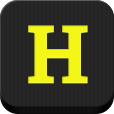
<style>
.page{position:relative;width:114px;height:114px;background:#242424}
.page>*{position:absolute;margin:0}
.t1{font:79.3px "AdelleBasic-Bold";letter-spacing:0.02em;color:#f3f617}
</style>
<div class="page">
<p class="t1" style="left:28px;top:25px;width:60px;height:59px">H</p>
</div>
